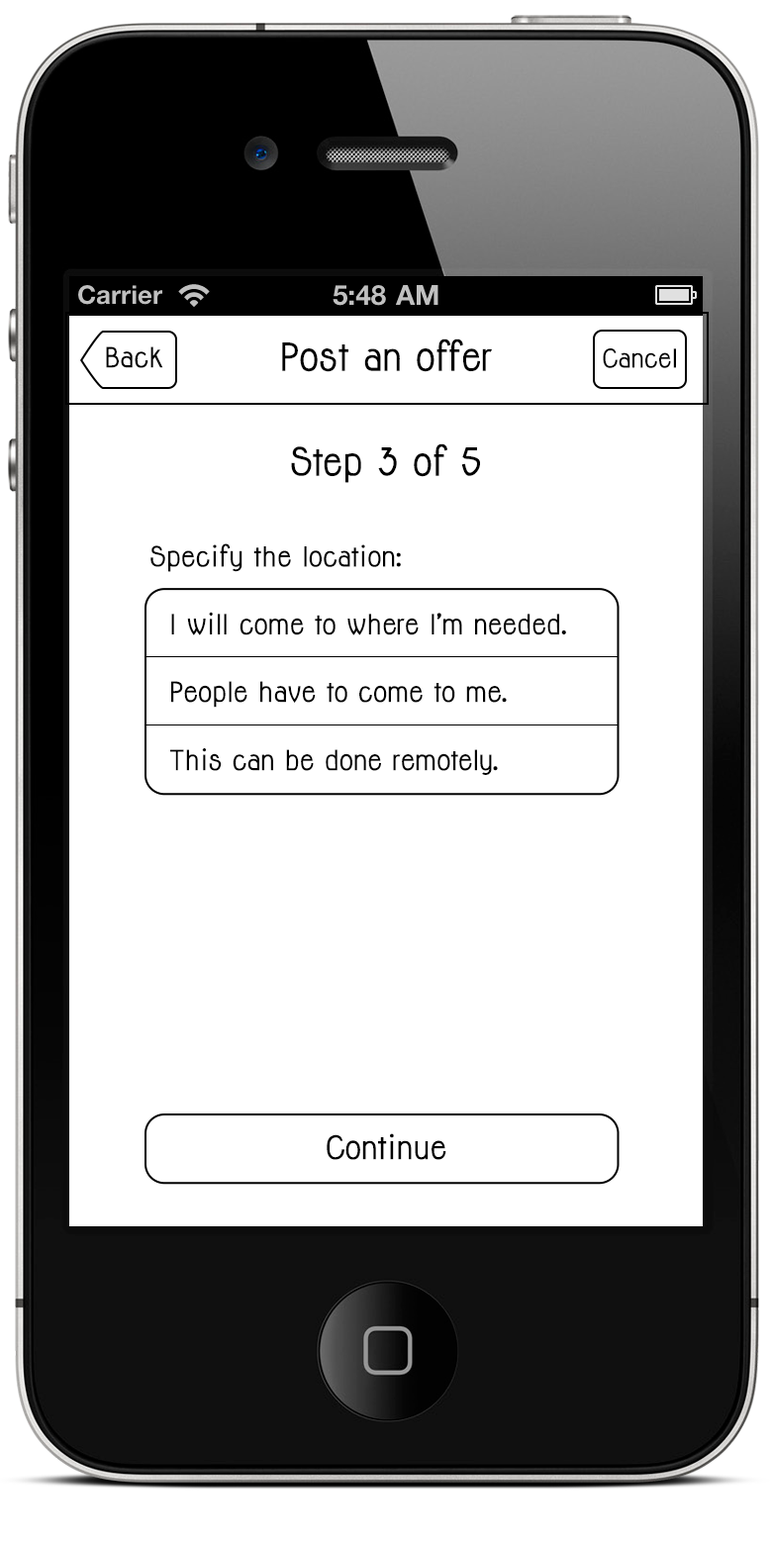
<style>
.page{position:relative;width:772px;height:1545px;background:#ffffff}
.page>*{position:absolute;margin:0}
.t1{font:35.6px "Jolly-Bold";color:#000000}
.t2{font:25.7px "Jolly-Bold";color:#000000}
.t3{font:23.8px "Jolly-Bold";color:#000000}
.t4{font:25.5px "Jolly-Bold";color:#000000}
.t5{font:29.8px "Jolly-Bold";color:#000000}
</style>
<div class="page">
<p class="t1" style="left:282px;top:338px;width:210px;height:34px">Post an offer</p>
<p class="t2" style="left:106px;top:346px;width:57px;height:22px">Back</p>
<p class="t3" style="left:603px;top:348px;width:73px;height:20px">Cancel</p>
<p class="t1" style="left:291px;top:443px;width:189px;height:40px">Step 3 of 5</p>
<p class="t4" style="left:150px;top:543px;width:251px;height:29px">Specify the location:</p>
<p class="t2" style="left:171px;top:612px;width:395px;height:23px">I will come to where I’m needed.</p>
<p class="t2" style="left:171px;top:681px;width:336px;height:27px">People have to come to me.</p>
<p class="t2" style="left:170px;top:748px;width:328px;height:27px">This can be done remotely.</p>
<p class="t5" style="left:327px;top:1133px;width:119px;height:27px">Continue</p>
</div>
